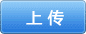
<style>
.page{position:relative;width:86px;height:34px}
.page>*{position:absolute;margin:0}
.t1{font:16px "MicrosoftYaHei";color:#ffffff;font-weight:bold}
</style>
<div class="page">
<p class="t1" style="left:26px;top:10px;width:38px;height:16px">上 传</p>
</div>
